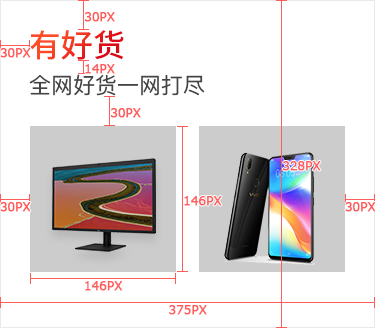
<style>
.page{position:relative;width:375px;height:328px;background:#ffffff}
.page>*{position:absolute;margin:0}
.t1{font:12px "Verdana";color:#ff5c5c;font-weight:bold}
.t2{font:32px "SourceHanSansCN-Medium"}
.t3{font:22px "PingFangSC-Regular";color:#444444}
</style>
<div class="page">
<p class="t1" style="left:84px;top:12px;width:31px;height:10px">30PX</p>
<p class="t2" style="left:30px;top:30px;width:94px;height:30px">有好货</p>
<p class="t1" style="left:0px;top:48px;width:31px;height:10px">30PX</p>
<p class="t1" style="left:85px;top:64px;width:30px;height:10px">14PX</p>
<p class="t3" style="left:29px;top:74px;width:176px;height:22px">全网好货一网打尽</p>
<p class="t1" style="left:110px;top:108px;width:31px;height:10px">30PX</p>
<p class="t1" style="left:282px;top:161px;width:39px;height:10px">328PX</p>
<p class="t1" style="left:184px;top:196px;width:38px;height:10px">146PX</p>
<p class="t1" style="left:0px;top:202px;width:31px;height:10px">30PX</p>
<p class="t1" style="left:345px;top:202px;width:31px;height:10px">30PX</p>
<p class="t1" style="left:85px;top:281px;width:38px;height:10px">146PX</p>
<p class="t1" style="left:169px;top:305px;width:38px;height:10px">375PX</p>
</div>
